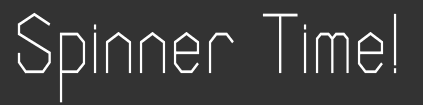
<style>
.page{position:relative;width:423px;height:105px;background:#333333}
.page>*{position:absolute;margin:0}
.t1{font:86.4px "HoneycombSharpRegular";color:#fefefe;scale:0.81 1}
</style>
<div class="page">
<p class="t1" style="left:17px;top:12px;width:380px;height:91px">Spinner Time!</p>
</div>
